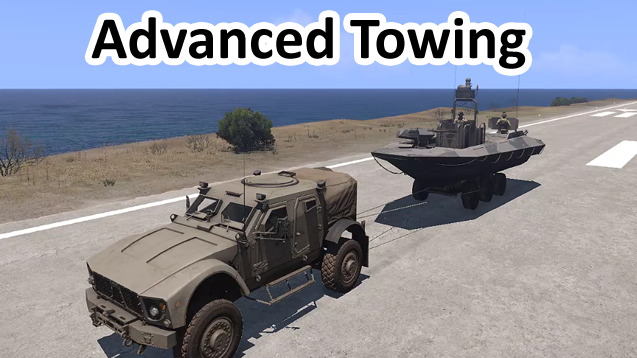
<style>
.page{position:relative;width:637px;height:358px}
.page>*{position:absolute;margin:0}
.t1{font:60px "Calibri-Bold";color:#000000}
</style>
<div class="page">
<p class="t1" style="left:91px;top:17px;width:435px;height:52px">Advanced Towing</p>
</div>
